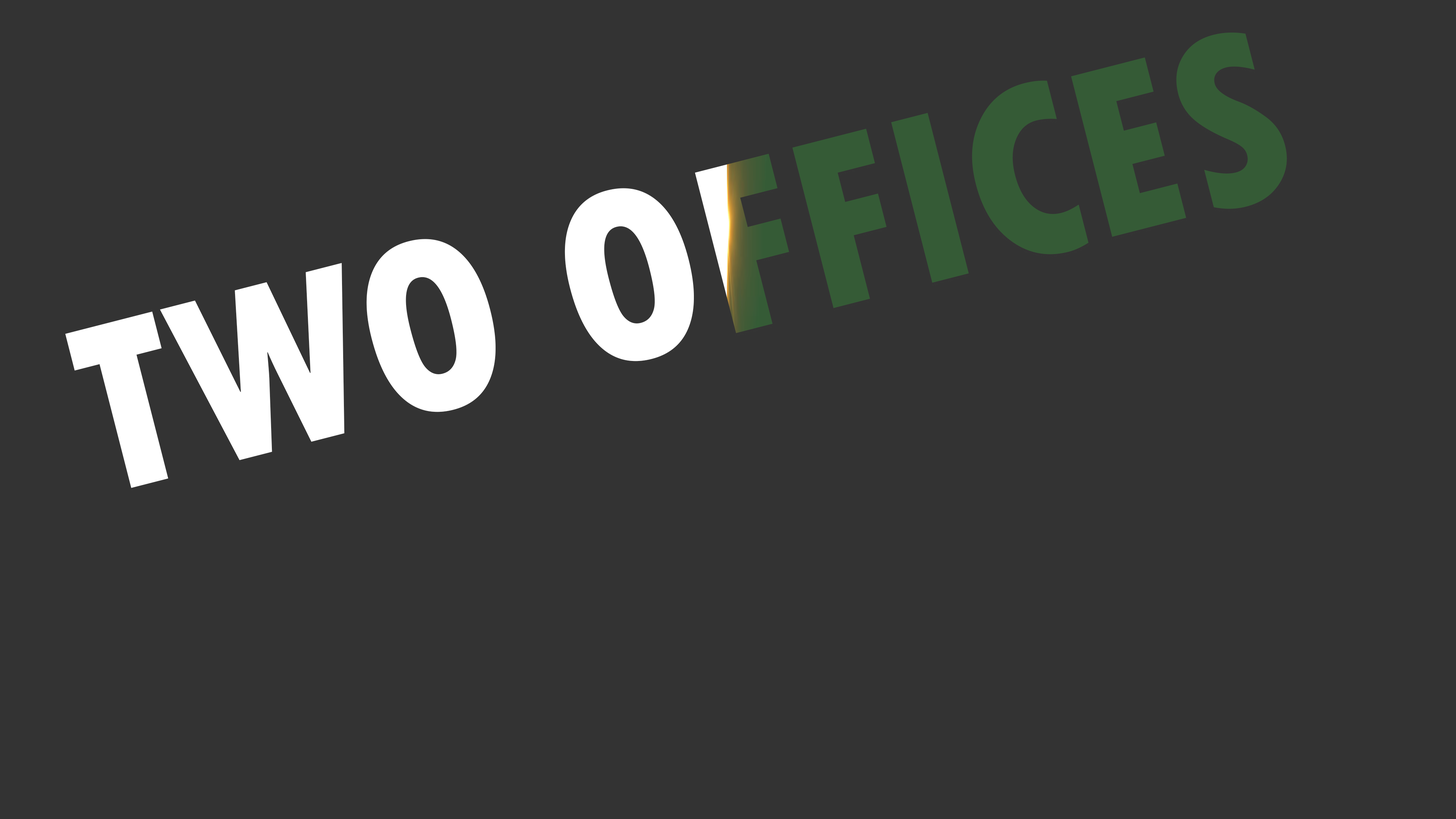
<style>
.page{position:relative;width:1456px;height:819px;background:#333333}
.page>*{position:absolute;margin:0}
.t1{font:254px "TwCenMT-CondensedExtraBold"}
</style>
<div class="page">
<p class="t1" style="left:65px;top:32px;width:1222px;height:456px;rotate:-14deg">TWO OFFICES</p>
</div>
